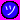
<style>
.page{position:relative;width:20px;height:20px;background:#ff00ff}
.page>*{position:absolute;margin:0}
.t1{font:12.1px "KozGoPr6N-Regular"}
</style>
<div class="page">
<p class="t1" style="left:5px;top:5px;width:11px;height:11px">ツ</p>
</div>
